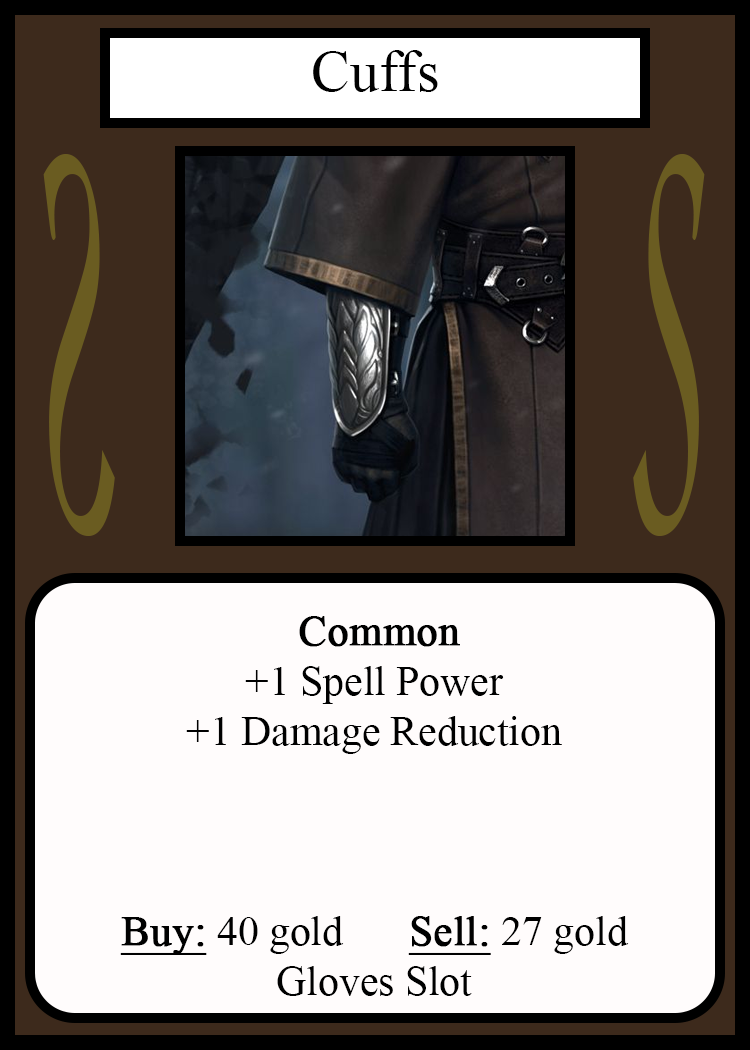
<style>
.page{position:relative;width:750px;height:1050px;background:#fffcfc}
.page>*{position:absolute;margin:0}
.t1{font:58.3px "TimesNewRomanPSMT";color:#010101}
.t2{font:548.5px "Apple-Chancery";color:#6a5c21;scale:0.27 1}
.t3{font:548.2px "Apple-Chancery";color:#6a5c21;scale:0.27 1}
.t4{font:41.7px "TimesNewRomanPSMT";color:#000000}
.t5{font:41.7px "TimesNewRomanPSMT";color:#000000;font-weight:bold}
.t6{font:41.7px "TimesNewRomanPSMT";color:#000000;font-weight:bold;text-decoration:underline}
</style>
<div class="page">
<p class="t1" style="left:313px;top:50px;width:125px;height:42px">Cuffs</p>
<p class="t2" style="left:43px;top:154px;width:72px;height:382px;rotate:180deg">S</p>
<p class="t3" style="left:633px;top:154px;width:72px;height:382px">S</p>
<p class="t4" style="left:120px;top:616px;width:509px;height:380px;text-align:center"><span class="t5">Common<br></span>+1 Spell Power<br>+1 Damage Reduction<br><br><br><br><span class="t6">Buy:</span> 40 gold   <span class="t6">Sell:</span> 27 gold<br>Gloves Slot</p>
</div>
